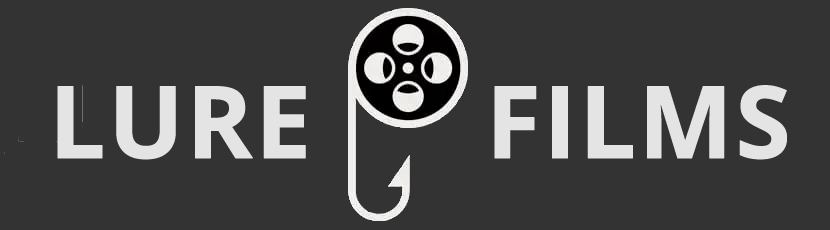
<style>
.page{position:relative;width:830px;height:230px;background:#333333}
.page>*{position:absolute;margin:0}
.t1{font:100px "OpenSans-Bold";color:#e4e4e4;text-transform:uppercase;font-weight:bold}
</style>
<div class="page">
<p class="t1" style="left:57px;top:85px;width:730px;height:75px">lure      films</p>
</div>
